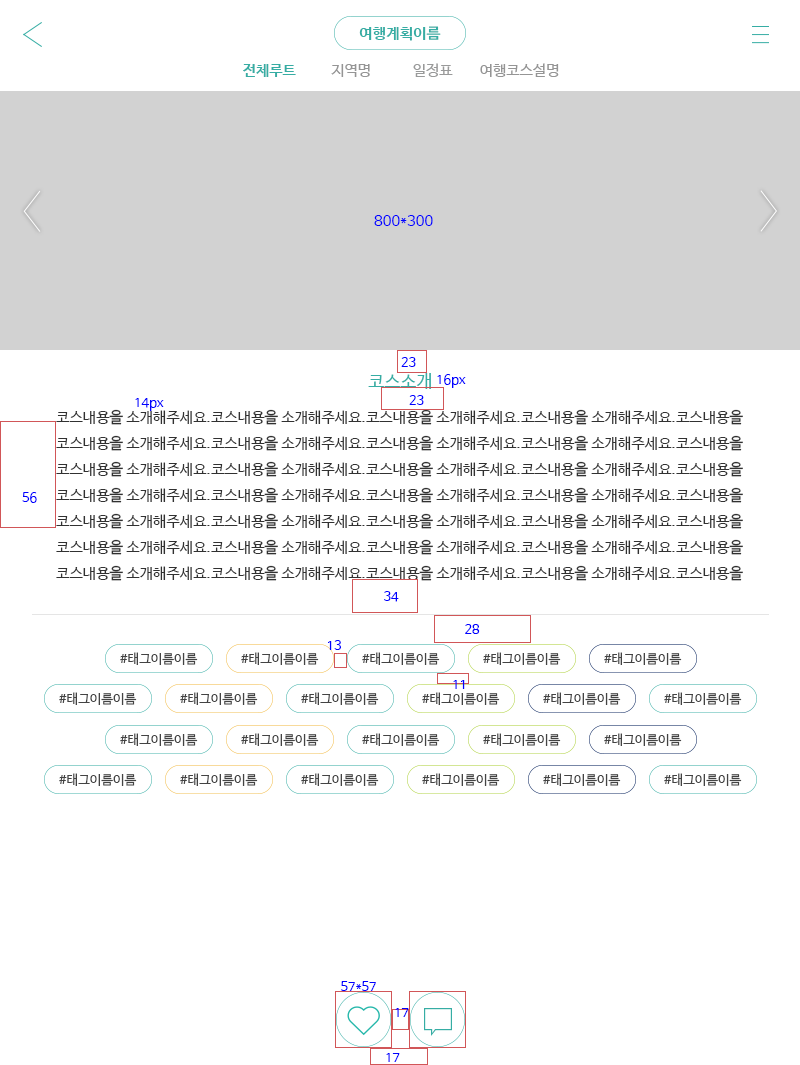
<style>
.page{position:relative;width:800px;height:1065px;background:#ffffff}
.page>*{position:absolute;margin:0}
.t1{font:15px "NanumBarunGothicBold";color:#36ada4}
.t2{font:15px "NanumBarunGothic";color:#959595}
.t3{font:15px "NanumBarunGothic";color:#999a9a}
.t4{font:15px "NanumBarunGothic";color:#0000ff}
.t5{font:13px "NanumBarunGothic";color:#0000ff}
.t6{font:18px "NanumBarunGothic";color:#36ada4}
.t7{font:15px/26px "NanumBarunGothic";color:#313131}
.t8{font:13px "NanumBarunGothic";color:#434343}
</style>
<div class="page">
<p class="t1" style="left:359px;top:26px;width:82px;height:15px">여행계획이름</p>
<p class="t1" style="left:243px;top:64px;width:53px;height:13px">전체루트</p>
<p class="t2" style="left:331px;top:64px;width:39px;height:13px">지역명</p>
<p class="t3" style="left:413px;top:63px;width:40px;height:14px">일정표</p>
<p class="t2" style="left:480px;top:63px;width:79px;height:14px">여행코스설명</p>
<p class="t4" style="left:374px;top:215px;width:59px;height:11px">800*300</p>
<p class="t5" style="left:401px;top:357px;width:15px;height:10px">23</p>
<p class="t6" style="left:368px;top:373px;width:63px;height:16px">코스소개</p>
<p class="t5" style="left:437px;top:374px;width:29px;height:14px">16px</p>
<p class="t5" style="left:135px;top:398px;width:29px;height:13px">14px</p>
<p class="t5" style="left:409px;top:395px;width:15px;height:10px">23</p>
<p class="t7" style="left:56px;top:409px;width:687px;height:172px">코스내용을 소개해주세요.코스내용을 소개해주세요.코스내용을 소개해주세요.코스내용을 소개해주세요.코스내용을<br>코스내용을 소개해주세요.코스내용을 소개해주세요.코스내용을 소개해주세요.코스내용을 소개해주세요.코스내용을<br>코스내용을 소개해주세요.코스내용을 소개해주세요.코스내용을 소개해주세요.코스내용을 소개해주세요.코스내용을<br>코스내용을 소개해주세요.코스내용을 소개해주세요.코스내용을 소개해주세요.코스내용을 소개해주세요.코스내용을<br>코스내용을 소개해주세요.코스내용을 소개해주세요.코스내용을 소개해주세요.코스내용을 소개해주세요.코스내용을<br>코스내용을 소개해주세요.코스내용을 소개해주세요.코스내용을 소개해주세요.코스내용을 소개해주세요.코스내용을<br>코스내용을 소개해주세요.코스내용을 소개해주세요.코스내용을 소개해주세요.코스내용을 소개해주세요.코스내용을</p>
<p class="t5" style="left:22px;top:492px;width:15px;height:11px">56</p>
<p class="t5" style="left:384px;top:591px;width:15px;height:11px">34</p>
<p class="t5" style="left:465px;top:624px;width:15px;height:10px">28</p>
<p class="t5" style="left:328px;top:640px;width:13px;height:10px">13</p>
<p class="t8" style="left:120px;top:652px;width:78px;height:13px">#태그이름이름</p>
<p class="t8" style="left:241px;top:652px;width:78px;height:13px">#태그이름이름</p>
<p class="t8" style="left:362px;top:652px;width:78px;height:13px">#태그이름이름</p>
<p class="t8" style="left:483px;top:652px;width:78px;height:13px">#태그이름이름</p>
<p class="t8" style="left:604px;top:652px;width:78px;height:13px">#태그이름이름</p>
<p class="t5" style="left:453px;top:680px;width:12px;height:9px">11</p>
<p class="t8" style="left:59px;top:692px;width:78px;height:13px">#태그이름이름</p>
<p class="t8" style="left:180px;top:692px;width:78px;height:13px">#태그이름이름</p>
<p class="t8" style="left:301px;top:692px;width:78px;height:13px">#태그이름이름</p>
<p class="t8" style="left:422px;top:692px;width:78px;height:13px">#태그이름이름</p>
<p class="t8" style="left:543px;top:692px;width:78px;height:13px">#태그이름이름</p>
<p class="t8" style="left:664px;top:692px;width:78px;height:13px">#태그이름이름</p>
<p class="t8" style="left:120px;top:733px;width:78px;height:13px">#태그이름이름</p>
<p class="t8" style="left:241px;top:733px;width:78px;height:13px">#태그이름이름</p>
<p class="t8" style="left:362px;top:733px;width:78px;height:13px">#태그이름이름</p>
<p class="t8" style="left:483px;top:733px;width:78px;height:13px">#태그이름이름</p>
<p class="t8" style="left:604px;top:733px;width:78px;height:13px">#태그이름이름</p>
<p class="t8" style="left:59px;top:773px;width:78px;height:13px">#태그이름이름</p>
<p class="t8" style="left:180px;top:773px;width:78px;height:13px">#태그이름이름</p>
<p class="t8" style="left:301px;top:773px;width:78px;height:13px">#태그이름이름</p>
<p class="t8" style="left:422px;top:773px;width:78px;height:13px">#태그이름이름</p>
<p class="t8" style="left:543px;top:773px;width:78px;height:13px">#태그이름이름</p>
<p class="t8" style="left:664px;top:773px;width:78px;height:13px">#태그이름이름</p>
<p class="t5" style="left:341px;top:981px;width:35px;height:10px">57*57</p>
<p class="t5" style="left:395px;top:1008px;width:14px;height:9px">17</p>
<p class="t5" style="left:386px;top:1053px;width:14px;height:9px">17</p>
</div>
